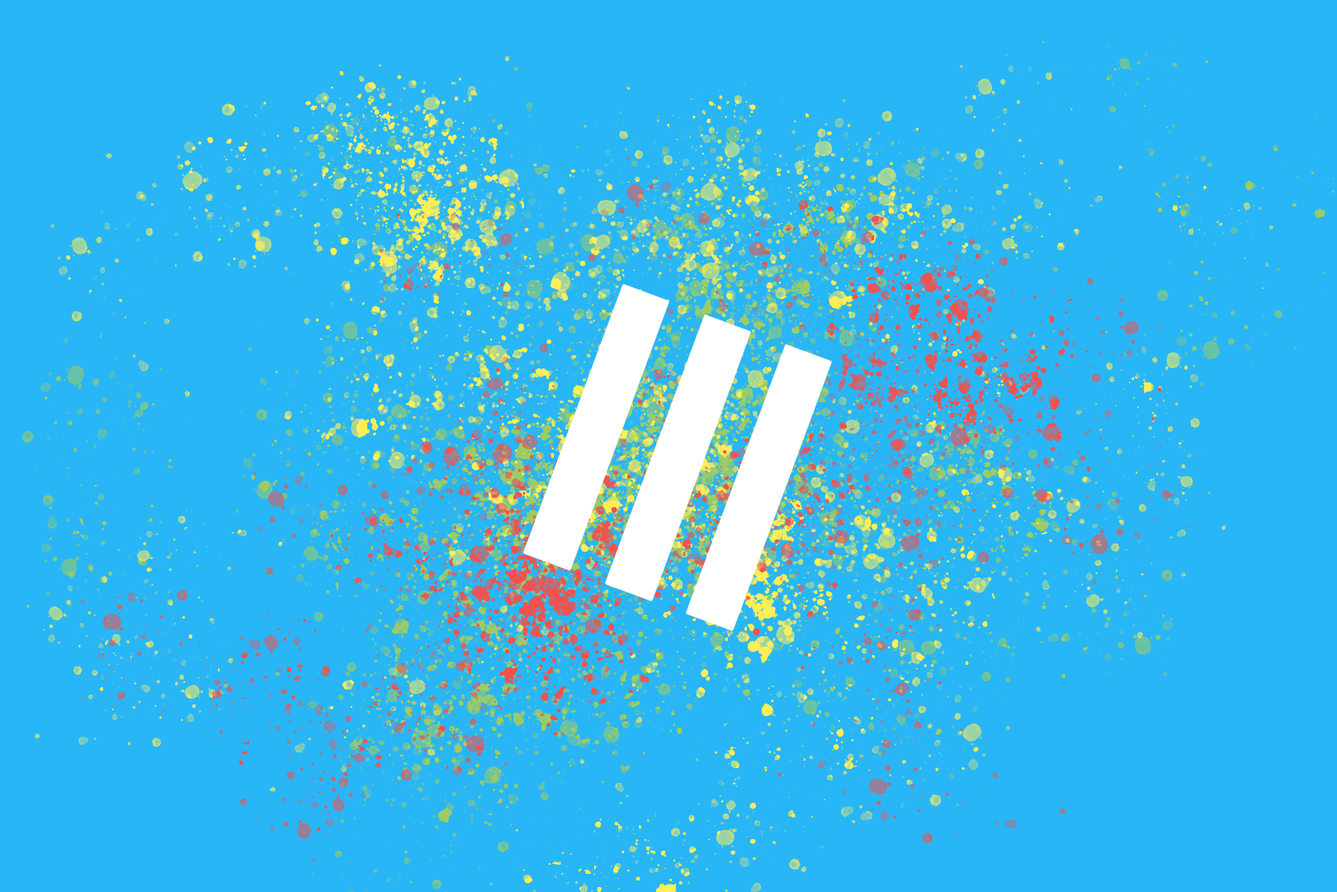
<style>
.page{position:relative;width:1337px;height:892px;background:#29b6f6}
.page>*{position:absolute;margin:0}
.t1{font:412.8px "Staatliches-Regular";color:#ffffff}
</style>
<div class="page">
<p class="t1" style="left:523px;top:284px;width:309px;height:347px;rotate:20deg">III</p>
</div>
